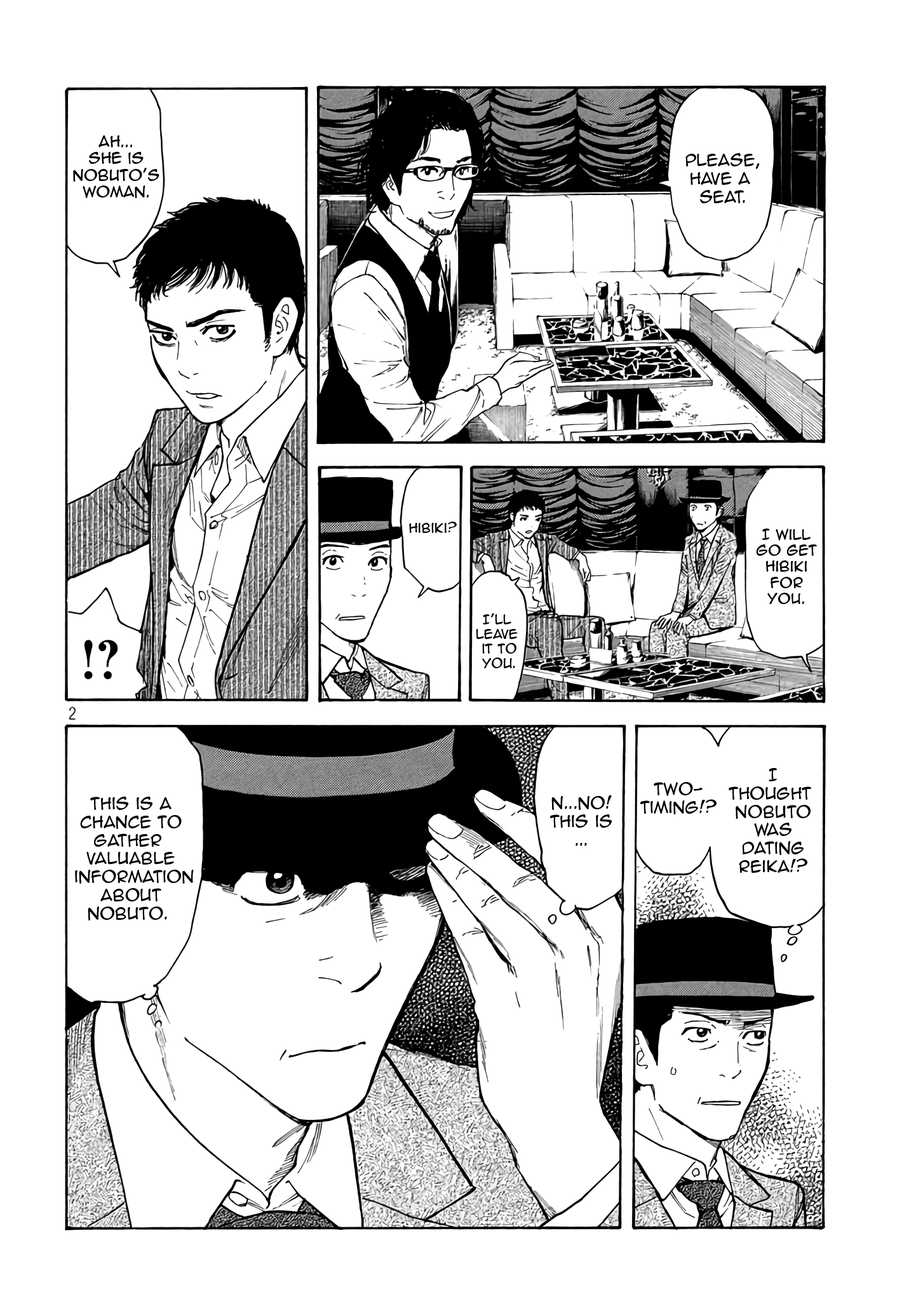
<style>
.page{position:relative;width:916px;height:1301px;background:#ffffff}
.page>*{position:absolute;margin:0}
.t1{font:14px "AnimeAce2.0BB";color:#000000}
.t2{font:15.3px "AnimeAce2.0BB";color:#000000}
.t3{font:12.1px "AnimeAce2.0BB";color:#000000}
.t4{font:13.3px "AnimeAce2.0BB";color:#000000}
</style>
<div class="page">
<p class="t1" style="left:73px;top:135px;width:86px;height:63px;text-align:center">ah...<br>She is<br>nobuto’s<br>woman.</p>
<p class="t2" style="left:686px;top:153px;width:74px;height:50px;text-align:center">Please,<br>have a <br>seat.</p>
<p class="t3" style="left:409px;top:522px;width:48px;height:11px">hibiki?</p>
<p class="t4" style="left:756px;top:529px;width:61px;height:75px;text-align:center">I will<br>GO get<br>hibiki<br>for<br>you.</p>
<p class="t3" style="left:476px;top:613px;width:42px;height:55px;text-align:center">I’ll <br>leave <br>it to<br>you.</p>
<p class="t2" style="left:729px;top:768px;width:82px;height:105px;text-align:center">I<br>Thought <br>nobuto<br>was<br>dating<br>reika!?</p>
<p class="t2" style="left:641px;top:782px;width:76px;height:33px;text-align:center">Two-<br>Timing!?</p>
<p class="t2" style="left:75px;top:797px;width:119px;height:124px;text-align:center">this is a<br>chance to<br>gather <br>valuable<br> information<br>about<br>nobuto.</p>
<p class="t2" style="left:550px;top:796px;width:62px;height:50px;text-align:center">n...no!<br>This is<br>...</p>
</div>
